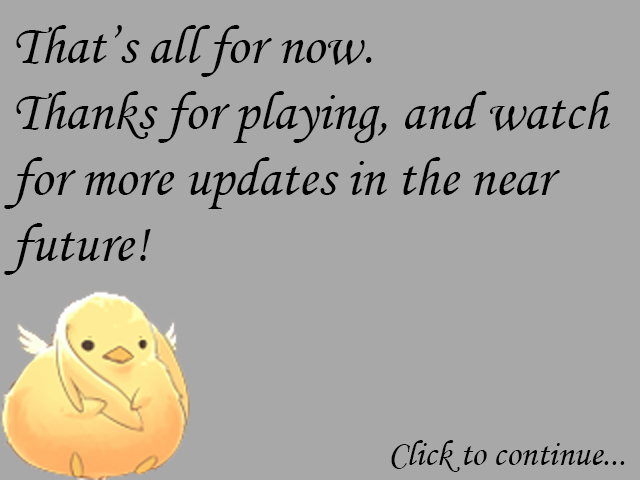
<style>
.page{position:relative;width:640px;height:480px;background:#a8a8a8}
.page>*{position:absolute;margin:0}
.t1{font:55px "MonotypeCorsiva";color:#000000}
.t2{font:36px "MonotypeCorsiva";color:#000000}
</style>
<div class="page">
<p class="t1" style="left:4px;top:25px;width:606px;height:250px">That’s all for now.<br>Thanks for playing, and watch for more updates in the near future!</p>
<p class="t2" style="left:391px;top:440px;width:234px;height:32px">Click to continue...</p>
</div>
